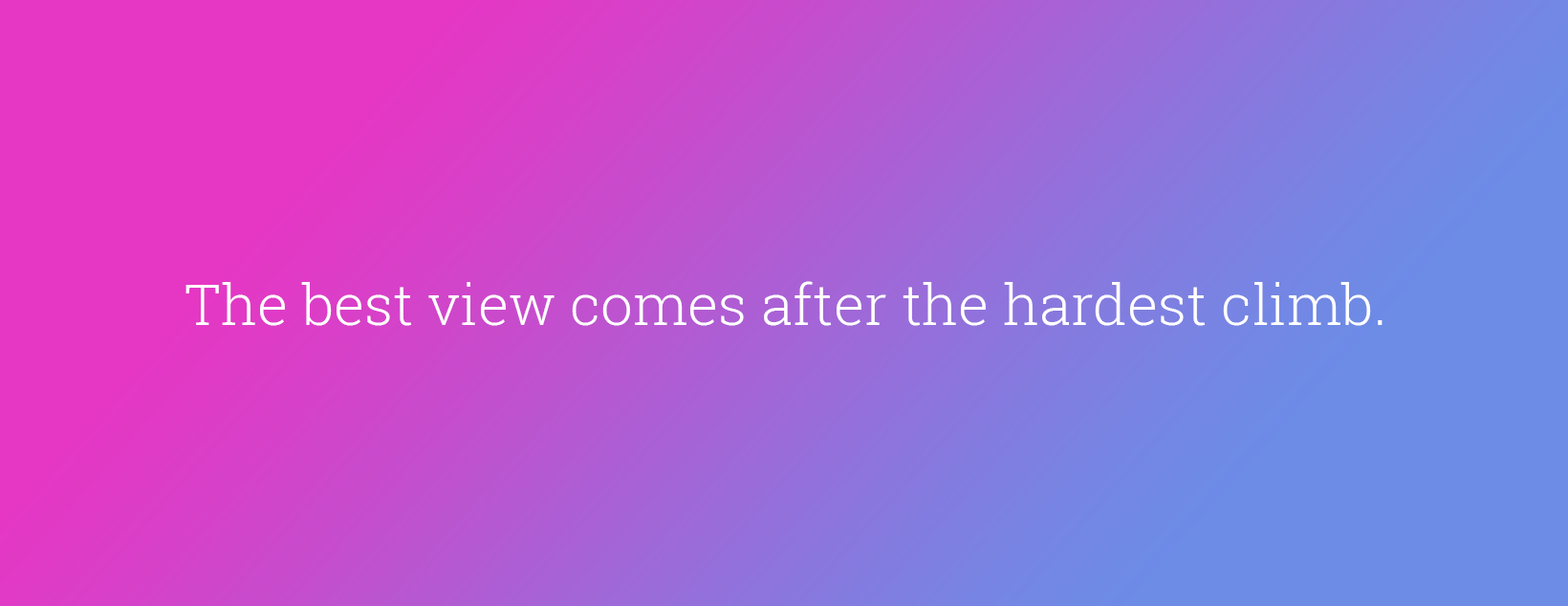
<style>
.page{position:relative;width:1568px;height:606px}
.page>*{position:absolute;margin:0}
.t1{font:57.4px "RobotoSlab-Light";color:#ffffff}
</style>
<div class="page">
<p class="t1" style="left:185px;top:281px;width:1198px;height:45px">The best view comes after the hardest climb.</p>
</div>
